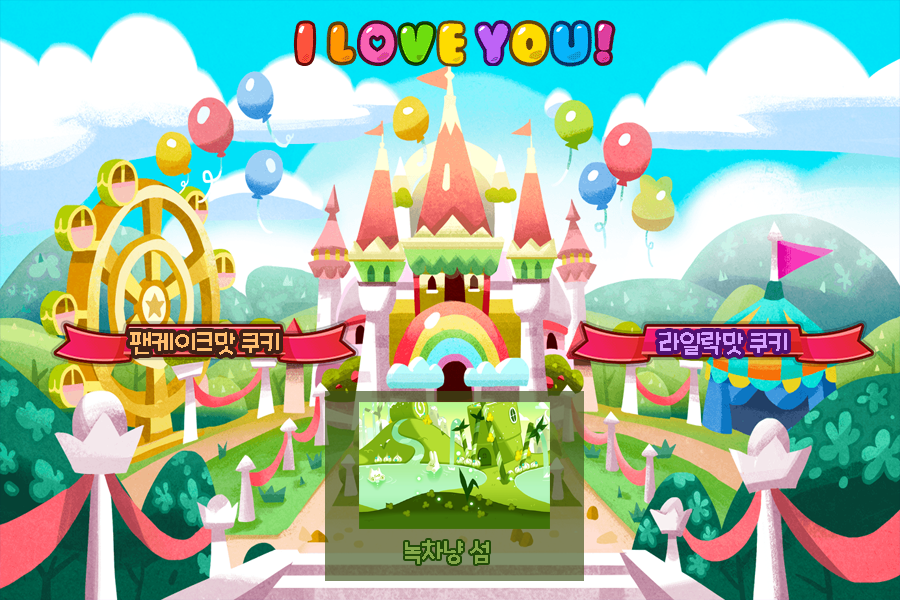
<style>
.page{position:relative;width:900px;height:600px}
.page>*{position:absolute;margin:0}
.t1{font:24px "CookieRun-Regular";letter-spacing:-0.04em;color:#ffbe6f}
.t2{font:24px "CookieRun-Regular";letter-spacing:-0.04em;color:#d7a2ff}
.t3{font:24px "CookieRun-Regular";letter-spacing:-0.04em;color:#84a84a}
</style>
<div class="page">
<p class="t1" style="left:130px;top:332px;width:149px;height:23px">팬케이크맛 쿠키</p>
<p class="t2" style="left:659px;top:332px;width:128px;height:23px">라일락맛 쿠키</p>
<p class="t3" style="left:405px;top:540px;width:84px;height:24px">녹차냥 섬</p>
</div>
